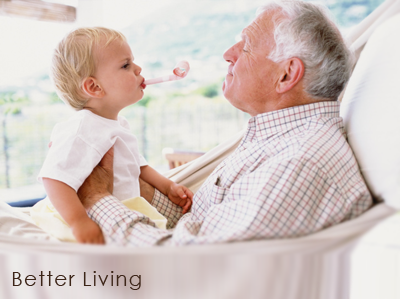
<style>
.page{position:relative;width:400px;height:299px}
.page>*{position:absolute;margin:0}
.t1{font:20.4px "CenturyGothic";letter-spacing:0.05em;color:#3c2518}
</style>
<div class="page">
<p class="t1" style="left:12px;top:271px;width:129px;height:19px">Better Living</p>
</div>
